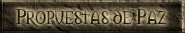
<style>
.page{position:relative;width:185px;height:33px}
.page>*{position:absolute;margin:0}
.t1{font:20px "Morpheus"}
</style>
<div class="page">
<p class="t1" style="left:16px;top:9px;width:151px;height:18px">Propuestas de Paz</p>
</div>
